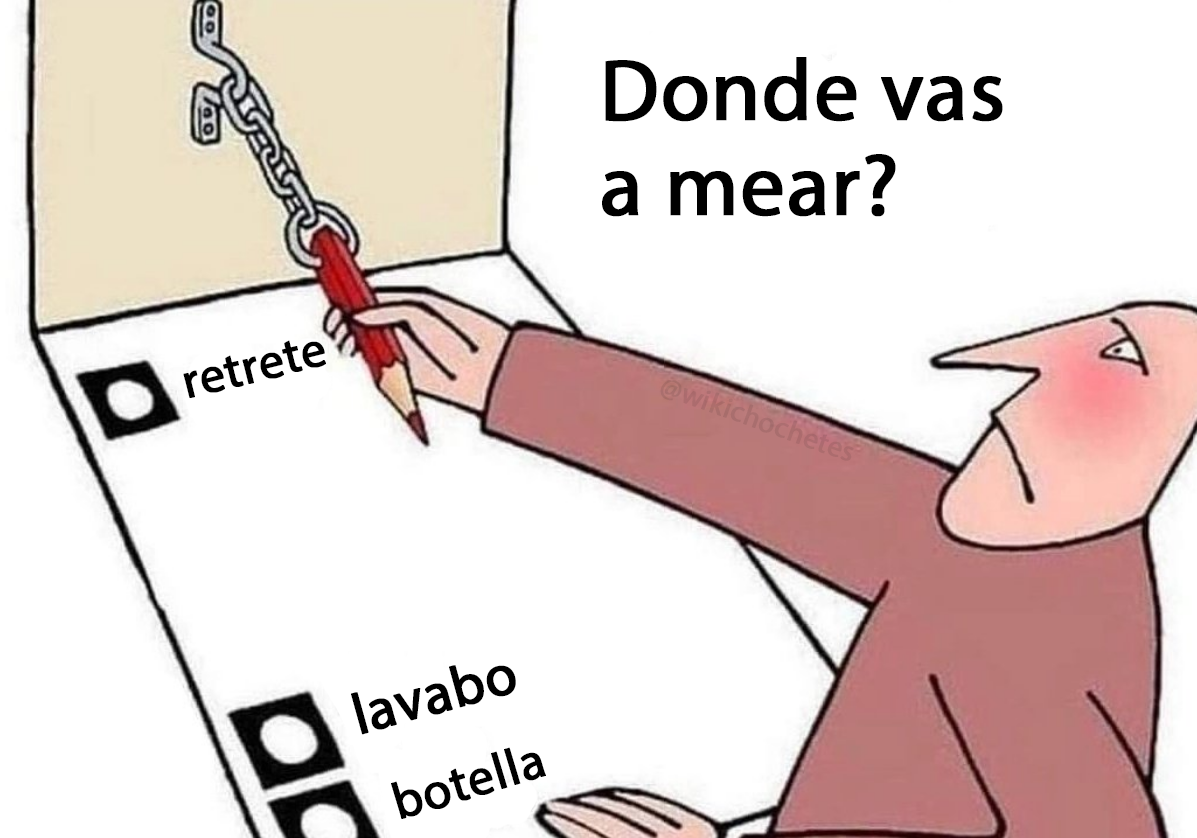
<style>
.page{position:relative;width:1197px;height:838px;background:#ffffff}
.page>*{position:absolute;margin:0}
.t1{font:87.6px "MyriadPro-Regular";color:#000000;font-weight:bold}
.t2{font:49.6px "MyriadPro-Regular";color:#000000;font-weight:bold}
.t3{font:57.5px "MyriadPro-Regular";color:#000000;font-weight:bold}
.t4{font:51.2px "MyriadPro-Regular";color:#000000;font-weight:bold}
</style>
<div class="page">
<p class="t1" style="left:602px;top:57px;width:401px;height:160px">Donde vas<br>a mear?</p>
<p class="t2" style="left:183px;top:340px;width:143px;height:58px;rotate:-14deg">retrete</p>
<p class="t3" style="left:351px;top:665px;width:165px;height:70px;rotate:-16deg">lavabo</p>
<p class="t4" style="left:391px;top:747px;width:155px;height:72px;rotate:-17deg">botella</p>
</div>
